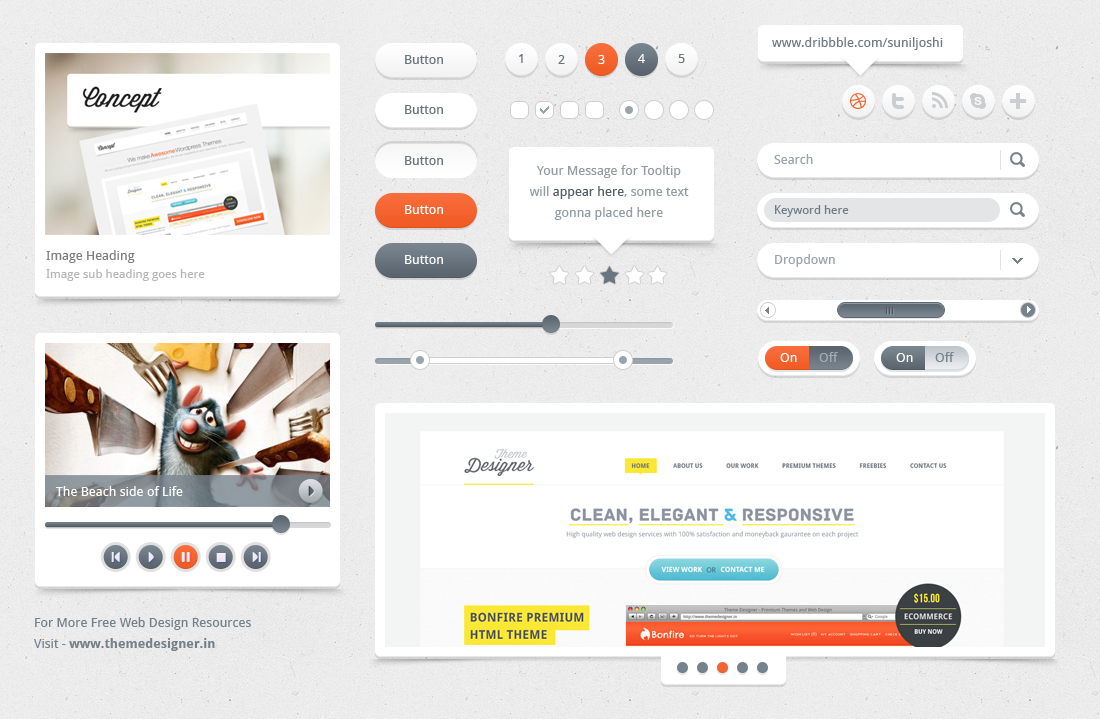
<style>
.page{position:relative;width:1100px;height:719px;background:#ffffff}
.page>*{position:absolute;margin:0}
.t1{font:13px "DroidSans";color:#707d87}
.t2{font:13px "DroidSans";color:#6c747f}
.t3{font:13px "DroidSans";color:#ffffff}
.t4{font:13px "DroidSans";color:#99a4ac}
.t5{font:13px/21px "DroidSans";color:#929ca3}
.t6{font:13px/21px "DroidSans";color:#545f67}
.t7{font:12px "DroidSans";color:#707d87}
.t8{font:12px/18px "DroidSans";color:#b6b6b6}
.t9{font:13px/18px "DroidSans";color:#7f7f7f}
.t10{font:13px "DroidSans";color:#a2acb5}
.t11{font:13px "DroidSans";color:#76838d}
.t12{font:13px/21px "DroidSans";color:#74818b}
.t13{font:13px/21px "DroidSans-Bold";color:#74818b}
</style>
<div class="page">
<p class="t1" style="left:772px;top:37px;width:171px;height:13px">www.dribbble.com/suniljoshi</p>
<p class="t2" style="left:519px;top:54px;width:4px;height:9px">1</p>
<p class="t3" style="left:638px;top:54px;width:7px;height:9px">4</p>
<p class="t2" style="left:678px;top:54px;width:7px;height:9px">5</p>
<p class="t2" style="left:405px;top:55px;width:38px;height:9px">Button</p>
<p class="t2" style="left:558px;top:55px;width:7px;height:9px">2</p>
<p class="t3" style="left:598px;top:55px;width:7px;height:9px">3</p>
<p class="t2" style="left:405px;top:105px;width:38px;height:9px">Button</p>
<p class="t2" style="left:405px;top:156px;width:38px;height:9px">Button</p>
<p class="t4" style="left:774px;top:154px;width:39px;height:10px">Search</p>
<p class="t5" style="left:529px;top:165px;width:160px;height:55px;text-align:center">Your Message for Tooltip<br>will <span class="t6">appear here</span>, some text<br>gonna placed here</p>
<p class="t3" style="left:405px;top:205px;width:38px;height:9px">Button</p>
<p class="t7" style="left:775px;top:205px;width:74px;height:12px">Keyword here</p>
<p class="t8" style="left:46px;top:250px;width:159px;height:31px"><span class="t9">Image Heading<br></span>Image sub heading goes here</p>
<p class="t3" style="left:405px;top:255px;width:38px;height:9px">Button</p>
<p class="t4" style="left:775px;top:254px;width:60px;height:13px">Dropdown</p>
<p class="t3" style="left:780px;top:353px;width:17px;height:9px">On</p>
<p class="t10" style="left:819px;top:352px;width:19px;height:10px">Off</p>
<p class="t3" style="left:896px;top:353px;width:17px;height:9px">On</p>
<p class="t11" style="left:935px;top:352px;width:19px;height:10px">Off</p>
<p class="t3" style="left:56px;top:486px;width:127px;height:10px">The Beach side of Life</p>
<p class="t12" style="left:34px;top:617px;width:217px;height:34px">For More Free Web Design Resources<br>Visit - <span class="t13">www.themedesigner.in</span></p>
</div>
